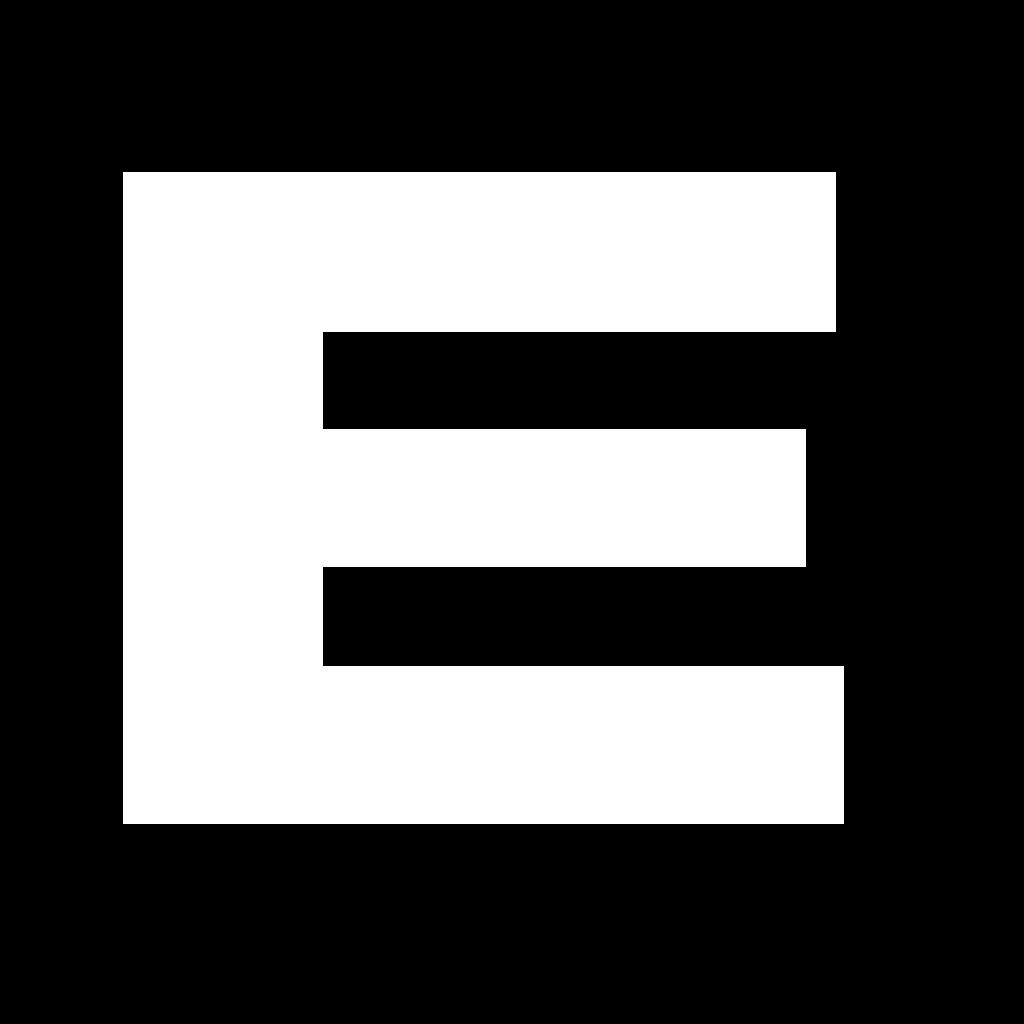
<style>
.page{position:relative;width:1024px;height:1024px;background:#000000}
.page>*{position:absolute;margin:0}
.t1{font:895.8px "Square721BT-BoldExtended";color:#ffffff}
</style>
<div class="page">
<p class="t1" style="left:123px;top:172px;width:721px;height:652px">E</p>
</div>
